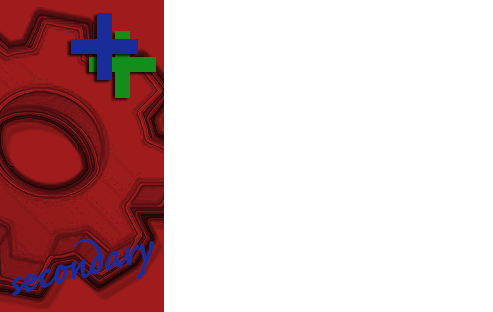
<style>
.page{position:relative;width:493px;height:312px;background:#ffffff}
.page>*{position:absolute;margin:0}
.t1{font:47.8px "CaflischScriptPro-Bold";color:#1a2c99}
</style>
<div class="page">
<p class="t1" style="left:12px;top:239px;width:142px;height:57px;rotate:-15deg">secondary</p>
</div>
